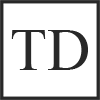
<style>
.page{position:relative;width:100px;height:100px;background:#ffffff}
.page>*{position:absolute;margin:0}
.t1{font:60.5px "TimesNewRomanPSMT";color:#282828}
</style>
<div class="page">
<p class="t1" style="left:11px;top:30px;width:77px;height:40px">TD</p>
</div>
